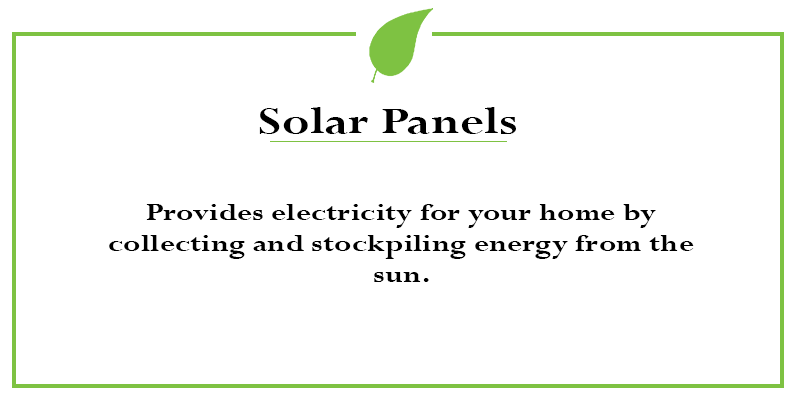
<style>
.page{position:relative;width:800px;height:400px;background:#ffffff}
.page>*{position:absolute;margin:0}
.t1{font:40.8px "Perpetua-Bold";color:#000000;scale:1.26 1}
.t2{font:25.6px "Perpetua-Bold";color:#000000;scale:1.26 1}
</style>
<div class="page">
<p class="t1" style="left:259px;top:107px;width:257px;height:27px">Solar Panels</p>
<p class="t2" style="left:109px;top:204px;width:585px;height:78px;text-align:center">Provides electricity for your home by collecting and stockpiling energy from the sun.</p>
</div>
